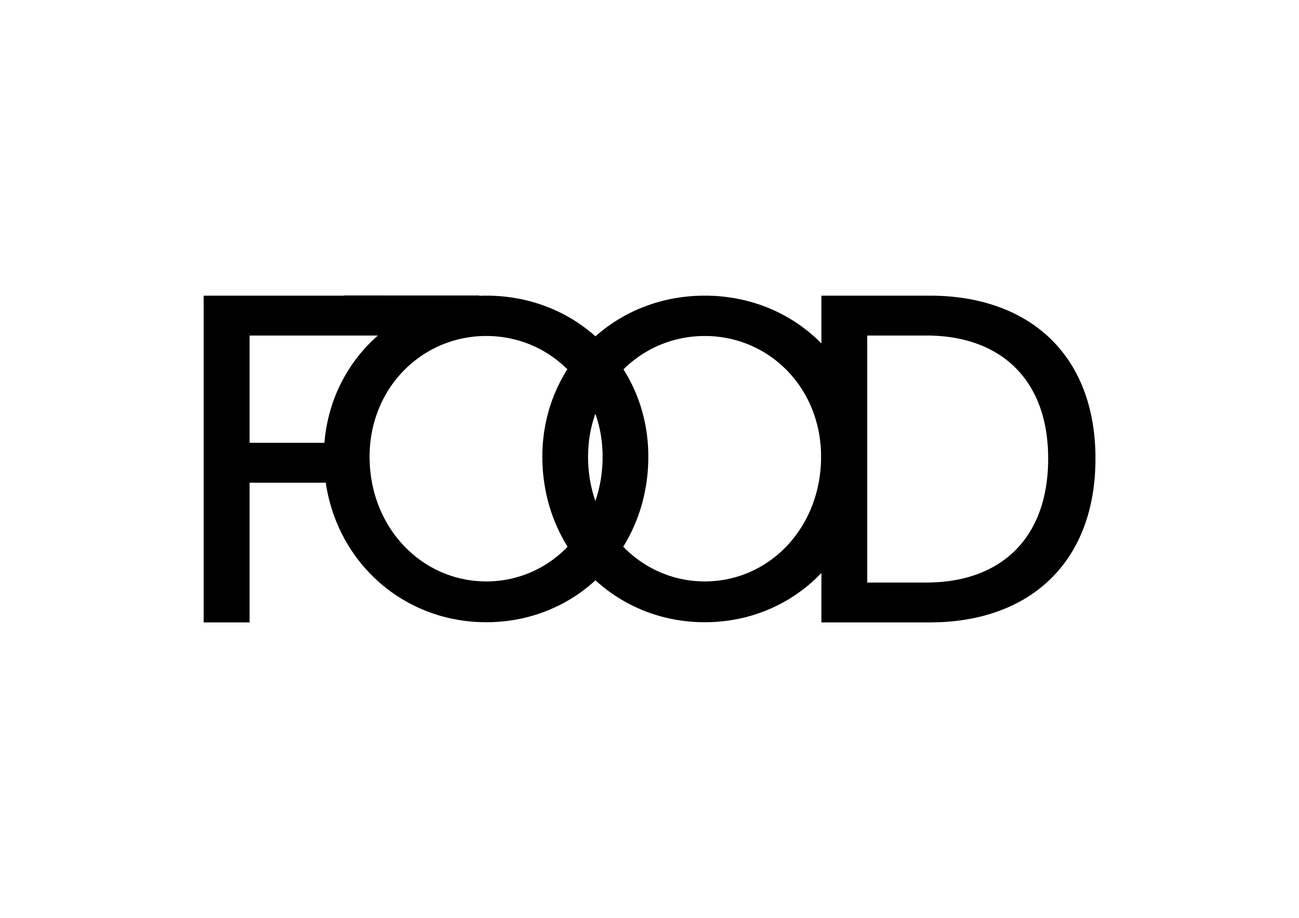
<style>
.page{position:relative;width:1299px;height:918px;background:#ffffff}
.page>*{position:absolute;margin:0}
.t1{font:462.8px "MuseoSans-500";color:#000000}
.t2{font:447.4px "MuseoSans-500";color:#000000}
</style>
<div class="page">
<p class="t1" style="left:204px;top:295px;width:180px;height:328px">F</p>
<p class="t2" style="left:324px;top:295px;width:324px;height:327px">O</p>
<p class="t1" style="left:344px;top:295px;width:135px;height:40px">-</p>
<p class="t2" style="left:542px;top:295px;width:325px;height:327px">O</p>
<p class="t1" style="left:821px;top:295px;width:274px;height:328px">D</p>
</div>
